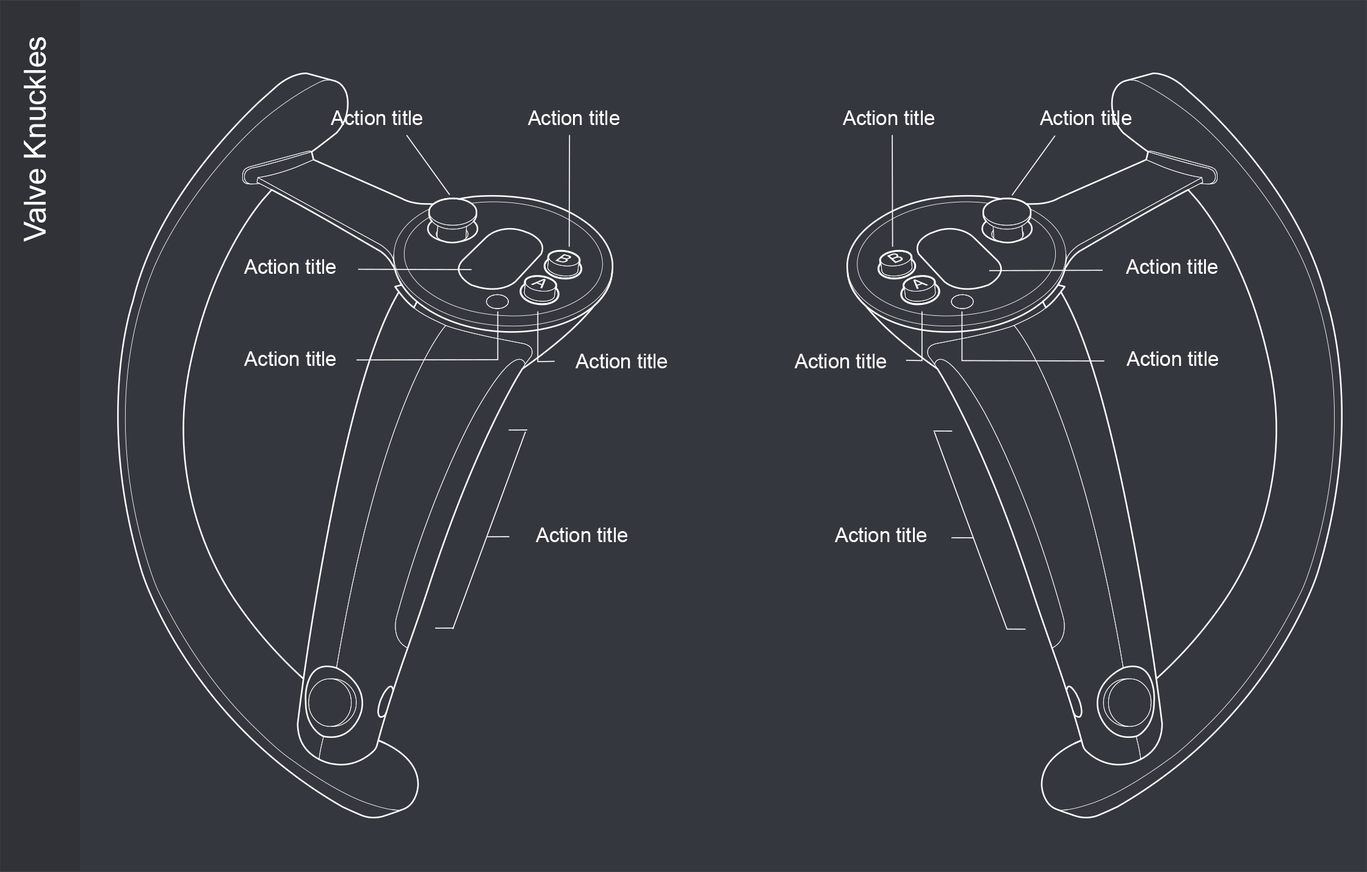
<style>
.page{position:relative;width:1367px;height:872px;background:#35373e}
.page>*{position:absolute;margin:0}
.t1{font:30.5px "ArialMT";color:#ffffff}
.t2{font:20px "ArialMT";color:#ffffff}
.t3{font:15.1px "ArialMT";color:#ffffff;scale:1.17 1}
.t4{font:15.3px "ArialMT";color:#ffffff;scale:1.17 1}
</style>
<div class="page">
<p class="t1" style="left:24px;top:37px;width:22px;height:205px;rotate:-90deg">Valve Knuckles</p>
<p class="t2" style="left:331px;top:110px;width:91px;height:15px">Action title</p>
<p class="t2" style="left:528px;top:110px;width:91px;height:15px">Action title</p>
<p class="t2" style="left:843px;top:110px;width:91px;height:15px">Action title</p>
<p class="t2" style="left:1040px;top:110px;width:91px;height:15px">Action title</p>
<p class="t3" style="left:555px;top:254px;width:16px;height:9px;rotate:14deg">B</p>
<p class="t4" style="left:887px;top:253px;width:16px;height:11px;rotate:-20deg">B</p>
<p class="t2" style="left:244px;top:259px;width:92px;height:15px">Action title</p>
<p class="t2" style="left:1126px;top:259px;width:91px;height:15px">Action title</p>
<p class="t4" style="left:530px;top:279px;width:16px;height:10px;rotate:-160deg">A</p>
<p class="t4" style="left:913px;top:279px;width:15px;height:10px;rotate:-20deg">A</p>
<p class="t2" style="left:244px;top:351px;width:92px;height:15px">Action title</p>
<p class="t2" style="left:575px;top:354px;width:92px;height:15px">Action title</p>
<p class="t2" style="left:794px;top:354px;width:92px;height:15px">Action title</p>
<p class="t2" style="left:1126px;top:351px;width:92px;height:15px">Action title</p>
<p class="t2" style="left:536px;top:528px;width:91px;height:14px">Action title</p>
<p class="t2" style="left:835px;top:528px;width:91px;height:14px">Action title</p>
</div>
